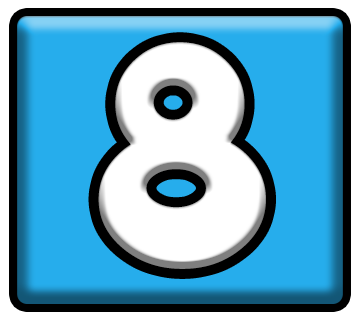
<style>
.page{position:relative;width:360px;height:320px;background:#26adec}
.page>*{position:absolute;margin:0}
.t1{font:333.8px "Funhouse";color:#ffffff;scale:0.91 1}
</style>
<div class="page">
<p class="t1" style="left:98px;top:42px;width:168px;height:227px">8</p>
</div>
